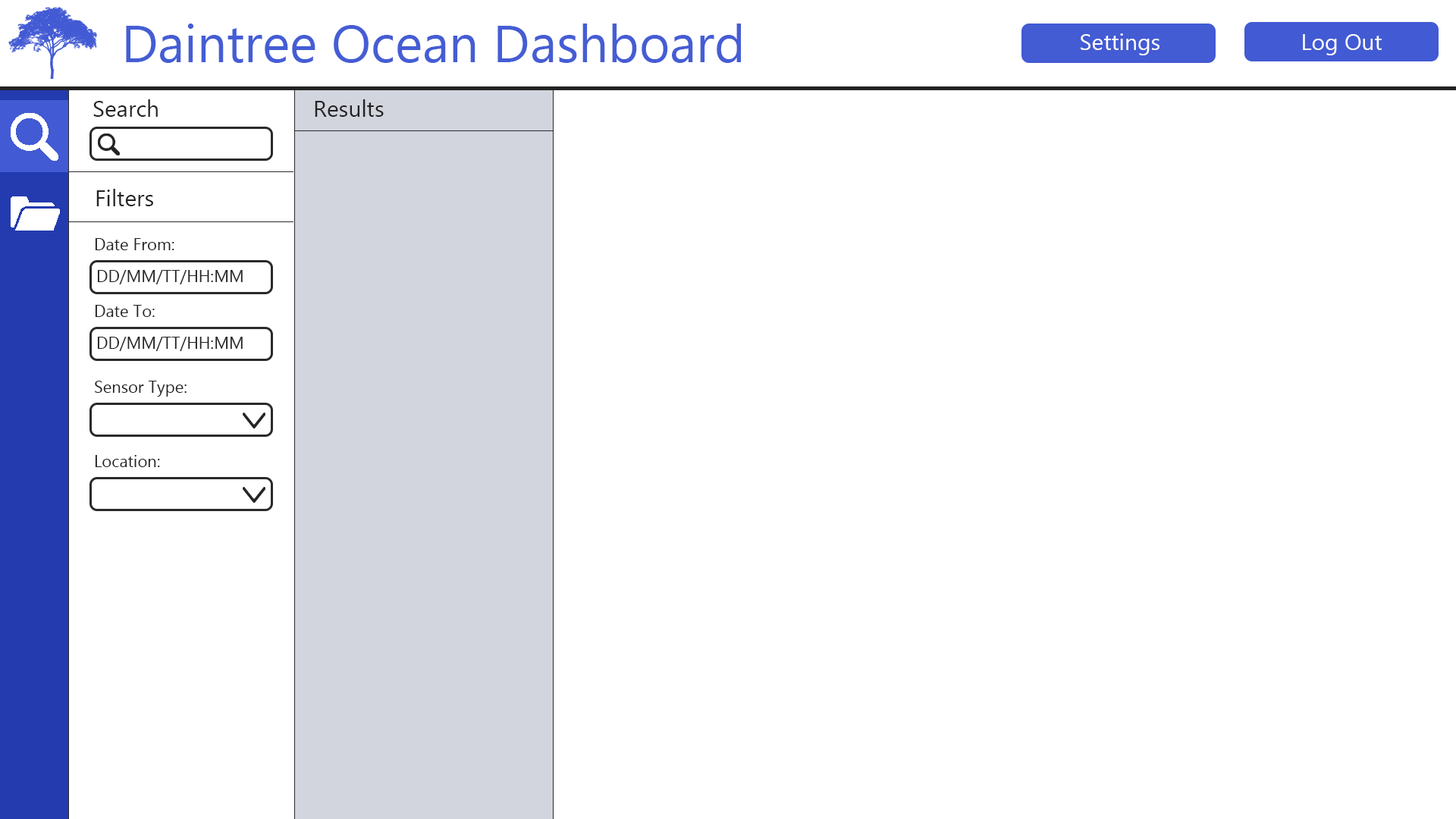
<style>
.page{position:relative;width:1456px;height:819px;background:#ffffff}
.page>*{position:absolute;margin:0}
.t1{font:52.3px "MyanmarText";color:#455dd4}
.t2{font:22.7px "MyanmarText";color:#ffffff}
.t3{font:22.7px "MyanmarText";color:#232323}
.t4{font:16.7px "MyanmarText";color:#232323}
</style>
<div class="page">
<p class="t1" style="left:126px;top:24px;width:615px;height:39px">Daintree Ocean Dashboard</p>
<p class="t2" style="left:1081px;top:33px;width:78px;height:22px">Settings</p>
<p class="t2" style="left:1303px;top:34px;width:79px;height:21px">Log Out</p>
<p class="t3" style="left:93px;top:99px;width:65px;height:18px">Search</p>
<p class="t3" style="left:315px;top:99px;width:69px;height:18px">Results</p>
<p class="t3" style="left:96px;top:189px;width:57px;height:17px">Filters</p>
<p class="t4" style="left:95px;top:238px;width:79px;height:12px">Date From:</p>
<p class="t4" style="left:97px;top:270px;width:146px;height:14px">DD/MM/TT/HH:MM</p>
<p class="t4" style="left:95px;top:305px;width:60px;height:12px">Date To:</p>
<p class="t4" style="left:97px;top:337px;width:146px;height:14px">DD/MM/TT/HH:MM</p>
<p class="t4" style="left:95px;top:381px;width:92px;height:16px">Sensor Type:</p>
<p class="t4" style="left:95px;top:455px;width:65px;height:12px">Location:</p>
</div>
